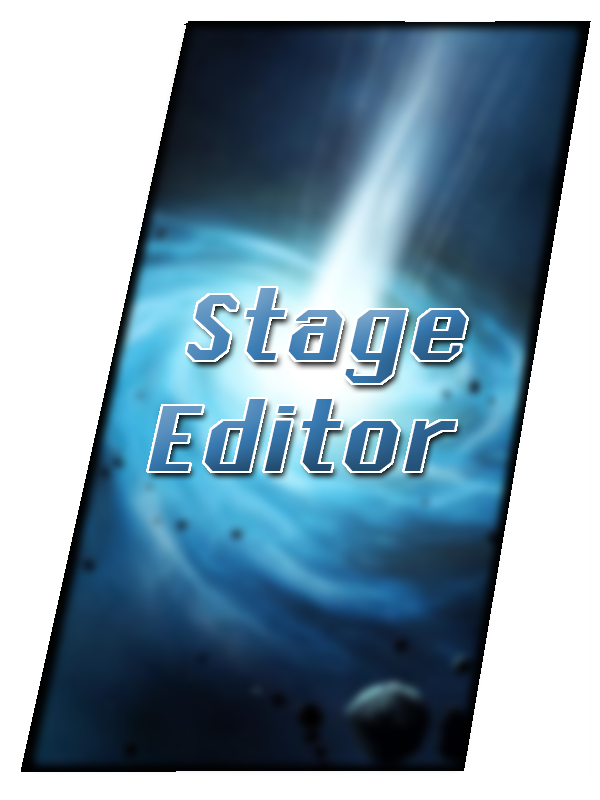
<style>
.page{position:relative;width:600px;height:800px;background:#ffffff}
.page>*{position:absolute;margin:0}
.t1{font:95.2px "Systematic-NewJ";scale:1.05 1}
</style>
<div class="page">
<p class="t1" style="left:148px;top:288px;width:319px;height:183px;text-align:center">Stage<br>Editor</p>
</div>
